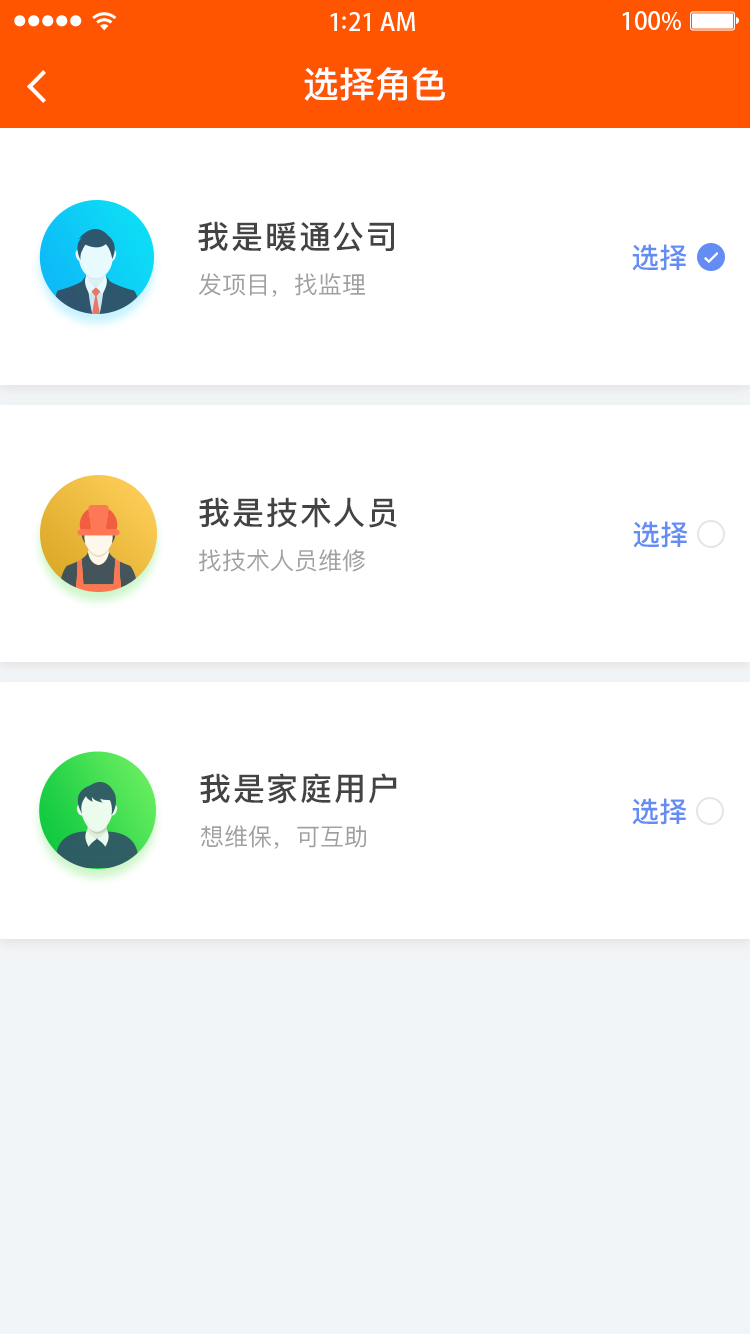
<style>
.page{position:relative;width:750px;height:1334px;background:#ffffff}
.page>*{position:absolute;margin:0}
.t1{font:36px "PingFangSC-Medium";color:#ffffff}
.t2{font:32px "PingFangSC-Medium";letter-spacing:0.06em;color:#434343}
.t3{font:28px "PingFangSC-Medium";color:#648df4}
.t4{font:24px "PingFangSC-Regular";color:#a0a0a0}
</style>
<div class="page">
<p class="t1" style="left:304px;top:67px;width:142px;height:34px">选择角色</p>
<p class="t2" style="left:198px;top:221px;width:196px;height:31px">我是暖通公司</p>
<p class="t3" style="left:632px;top:244px;width:55px;height:27px">选择</p>
<p class="t4" style="left:199px;top:273px;width:166px;height:24px">发项目，找监理</p>
<p class="t2" style="left:199px;top:497px;width:198px;height:31px">我是技术人员</p>
<p class="t3" style="left:633px;top:521px;width:55px;height:27px">选择</p>
<p class="t4" style="left:199px;top:549px;width:166px;height:23px">找技术人员维修</p>
<p class="t2" style="left:200px;top:773px;width:197px;height:31px">我是家庭用户</p>
<p class="t3" style="left:632px;top:798px;width:55px;height:27px">选择</p>
<p class="t4" style="left:201px;top:825px;width:165px;height:24px">想维保，可互助</p>
</div>
